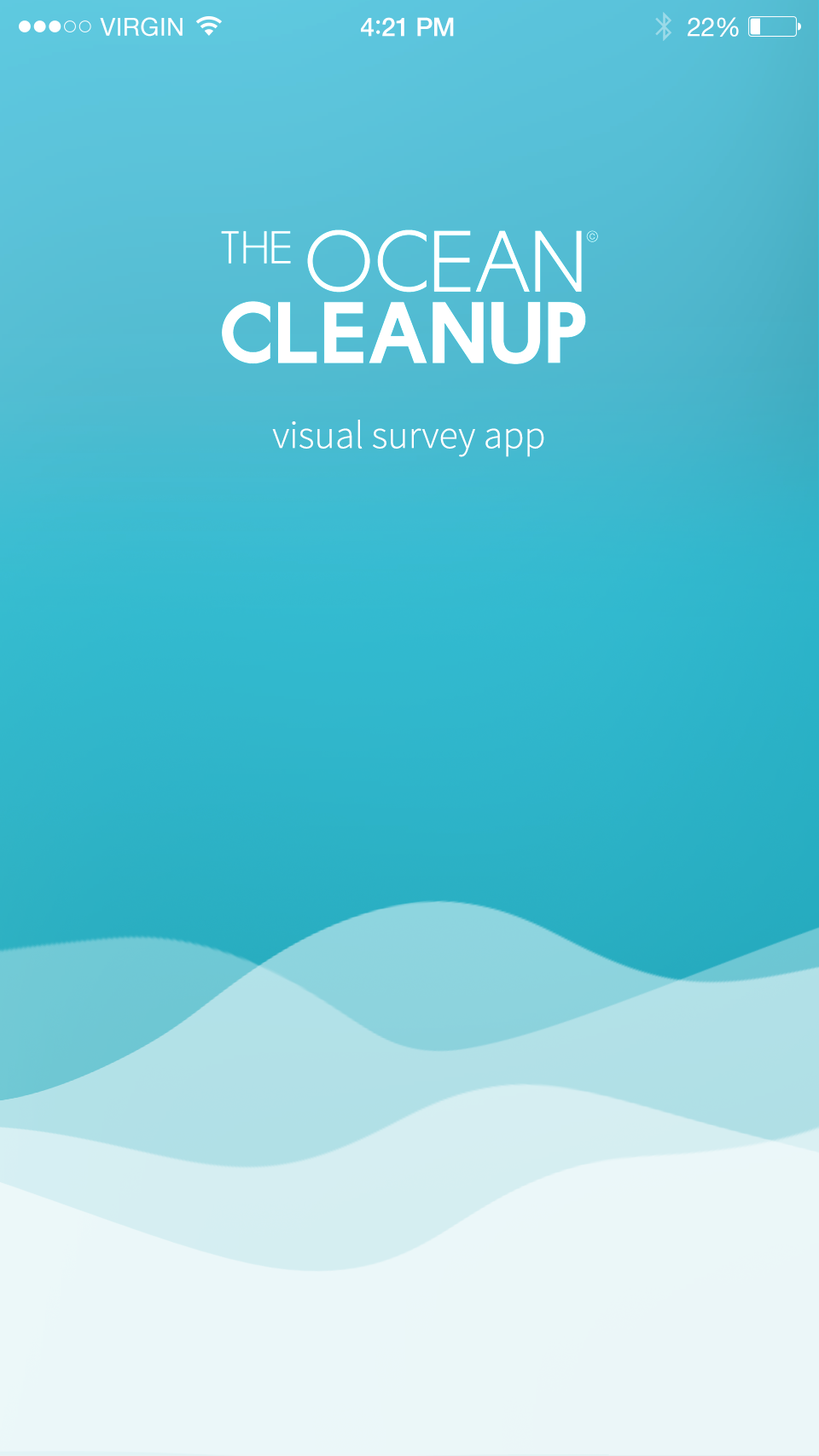
<style>
.page{position:relative;width:819px;height:1456px}
.page>*{position:absolute;margin:0}
.t1{font:24.7px "HelveticaNeue";letter-spacing:0.02em;color:#ffffff}
.t2{font:25.8px "HelveticaNeue-Medium";letter-spacing:-0.02em;color:#ffffff}
.t3{font:27.9px "Avenir-Medium";letter-spacing:-0.02em;color:#ffffff}
.t4{font:25.8px "HelveticaNeue";letter-spacing:-0.02em;color:#ffffff}
.t5{font:39.2px "SourceSansPro-Light";color:#ffffff}
</style>
<div class="page">
<p class="t1" style="left:100px;top:17px;width:83px;height:20px">VIRGIN</p>
<p class="t2" style="left:361px;top:17px;width:93px;height:20px">4<span class="t3">:</span>21 PM</p>
<p class="t4" style="left:688px;top:17px;width:51px;height:20px">22%</p>
<p class="t5" style="left:272px;top:420px;width:272px;height:37px">visual survey app</p>
</div>
